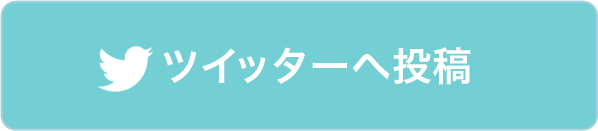
<style>
.page{position:relative;width:598px;height:131px;background:#74cfd4}
.page>*{position:absolute;margin:0}
.t1{font:40px "HiraKakuPro-W6";color:#ffffff}
</style>
<div class="page">
<p class="t1" style="left:163px;top:47px;width:308px;height:38px">ツイッターへ投稿</p>
</div>
